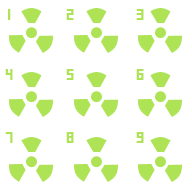
<style>
.page{position:relative;width:192px;height:192px;background:#ffffff}
.page>*{position:absolute;margin:0}
.t1{font:18px "Fruitymicrofont";color:#aee356}
</style>
<div class="page">
<p class="t1" style="left:8px;top:9px;width:3px;height:11px">1</p>
<p class="t1" style="left:66px;top:9px;width:8px;height:11px">2</p>
<p class="t1" style="left:136px;top:9px;width:8px;height:11px">3</p>
<p class="t1" style="left:5px;top:69px;width:8px;height:11px">4</p>
<p class="t1" style="left:66px;top:69px;width:8px;height:11px">5</p>
<p class="t1" style="left:136px;top:69px;width:8px;height:11px">6</p>
<p class="t1" style="left:5px;top:132px;width:8px;height:11px">7</p>
<p class="t1" style="left:66px;top:132px;width:8px;height:11px">8</p>
<p class="t1" style="left:136px;top:132px;width:8px;height:11px">9</p>
</div>
